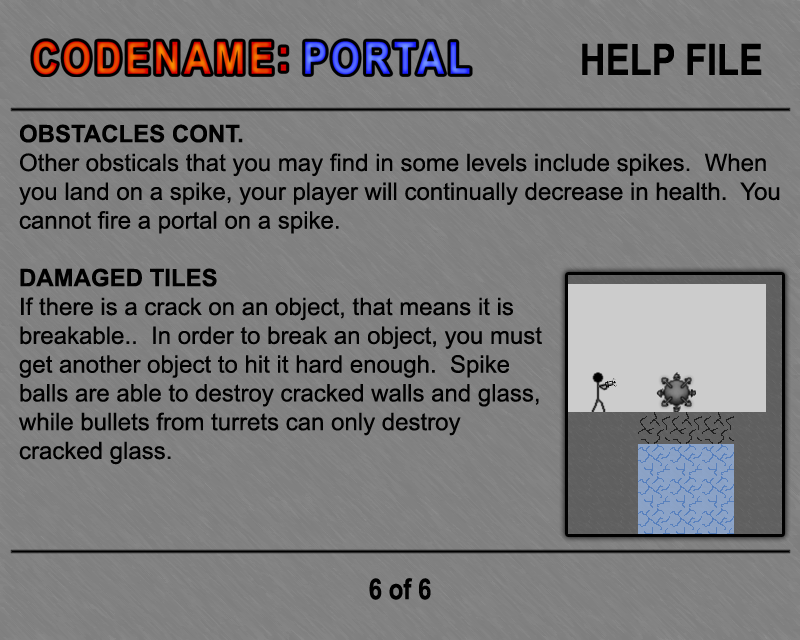
<style>
.page{position:relative;width:800px;height:640px;background:#808080}
.page>*{position:absolute;margin:0}
.t1{font:43.2px "Arial-BoldMT";color:#000000;scale:0.83 1}
.t2{font:24px "ArialMT";color:#000000}
.t3{font:24px "Arial-BoldMT";color:#000000}
.t4{font:28.8px "Arial-BoldMT";color:#000000;scale:0.83 1}
</style>
<div class="page">
<p class="t1" style="left:582px;top:43px;width:180px;height:32px">HELP FILE</p>
<p class="t2" style="left:19px;top:124px;width:761px;height:341px"><span class="t3">OBSTACLES CONT.<br></span>Other obsticals that you may find in some levels include spikes.  When you land on a spike, your player will continually decrease in health.  You cannot fire a portal on a spike.<br><br><span class="t3">DAMAGED TILES</span><br>If there is a crack on an object, that means it is <br>breakable..  In order to break an object, you must <br>get another object to hit it hard enough.  Spike <br>balls are able to destroy cracked walls and glass, <br>while bullets from turrets can only destroy<br>cracked glass.</p>
<p class="t4" style="left:369px;top:578px;width:62px;height:22px">6 of 6</p>
</div>
